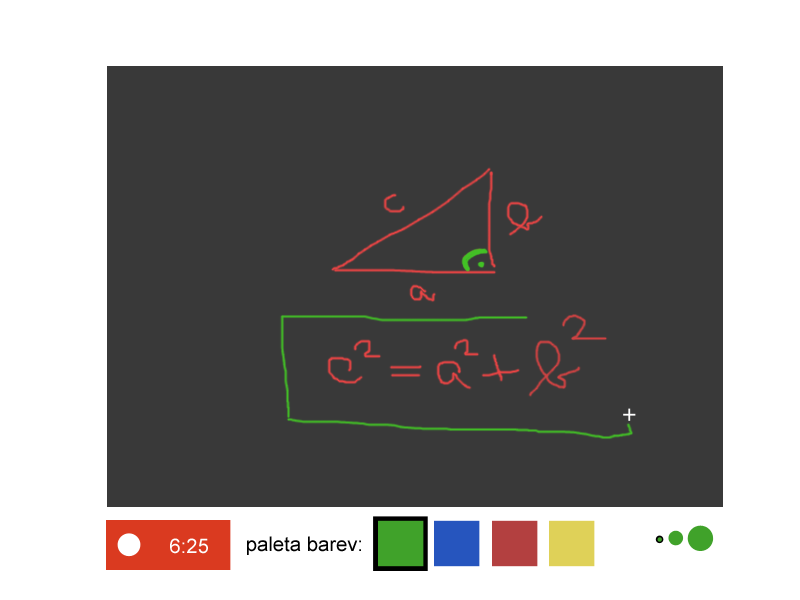
<style>
.page{position:relative;width:800px;height:600px;background:#393939}
.page>*{position:absolute;margin:0}
.t1{font:20.3px "ArialMT";color:#ffffff}
.t2{font:20.3px "ArialMT";color:#000000}
</style>
<div class="page">
<p class="t1" style="left:170px;top:538px;width:38px;height:16px">6:25</p>
<p class="t2" style="left:247px;top:536px;width:114px;height:19px">paleta barev:</p>
</div>
